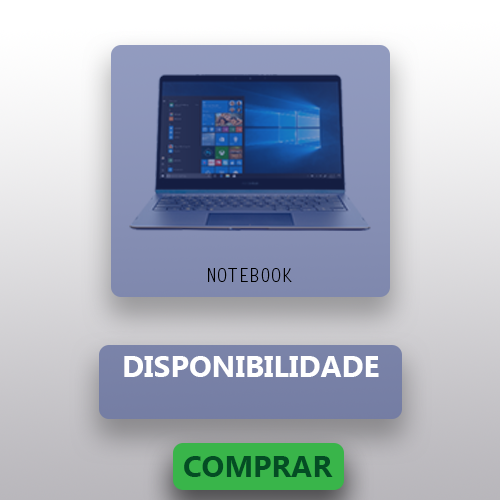
<style>
.page{position:relative;width:500px;height:500px}
.page>*{position:absolute;margin:0}
.t1{font:18px "LetterGothicStd";color:#000000}
.t2{font:30px "MicrosoftTaiLe-Bold";color:#ffffff}
.t3{font:30px "MicrosoftTaiLe-Bold";color:#044d24}
</style>
<div class="page">
<p class="t1" style="left:208px;top:268px;width:84px;height:14px">NOTEBOOK</p>
<p class="t2" style="left:124px;top:356px;width:255px;height:21px">DISPONIBILIDADE</p>
<p class="t3" style="left:184px;top:456px;width:149px;height:21px">COMPRAR</p>
</div>
